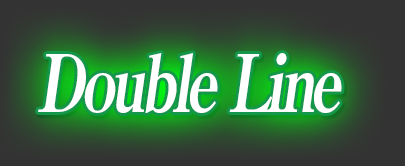
<style>
.page{position:relative;width:405px;height:166px}
.page>*{position:absolute;margin:0}
.t1{font:80px "RyuminPro-ExBold";letter-spacing:-0.08em;color:#ffffff;font-style:italic;scale:0.8 1}
</style>
<div class="page">
<p class="t1" style="left:38px;top:53px;width:304px;height:60px">Double Line</p>
</div>
